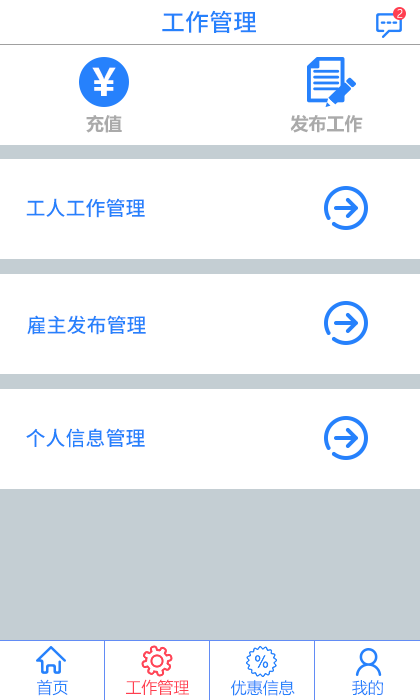
<style>
.page{position:relative;width:420px;height:700px;background:#ffffff}
.page>*{position:absolute;margin:0}
.t1{font:24px "NotoSansHans-Medium";color:#2681fc}
.t2{font:11px "MicrosoftYaHeiLight";color:#fcf9fa}
.t3{font:37.4px "MicrosoftYaHei-Bold";color:#ffffff}
.t4{font:18px "MicrosoftYaHei-Bold";color:#aaaaaa}
.t5{font:20px "NotoSansHans-Medium";color:#2681fc}
.t6{font:16px "MicrosoftYaHeiLight";color:#2681fc}
.t7{font:16px "MicrosoftYaHeiLight";color:#ff3e50}
</style>
<div class="page">
<p class="t1" style="left:162px;top:10px;width:94px;height:23px">工作管理</p>
<p class="t2" style="left:397px;top:9px;width:6px;height:9px">2</p>
<p class="t3" style="left:92px;top:67px;width:24px;height:29px">￥</p>
<p class="t4" style="left:86px;top:115px;width:36px;height:18px">充值</p>
<p class="t4" style="left:290px;top:115px;width:73px;height:18px">发布工作</p>
<p class="t5" style="left:26px;top:198px;width:119px;height:20px">工人工作管理</p>
<p class="t5" style="left:27px;top:315px;width:119px;height:20px">雇主发布管理</p>
<p class="t5" style="left:26px;top:428px;width:119px;height:20px">个人信息管理</p>
<p class="t6" style="left:37px;top:679px;width:31px;height:17px">首页</p>
<p class="t7" style="left:126px;top:679px;width:63px;height:16px">工作管理</p>
<p class="t6" style="left:231px;top:680px;width:64px;height:16px">优惠信息</p>
<p class="t6" style="left:352px;top:680px;width:31px;height:16px">我的</p>
</div>
